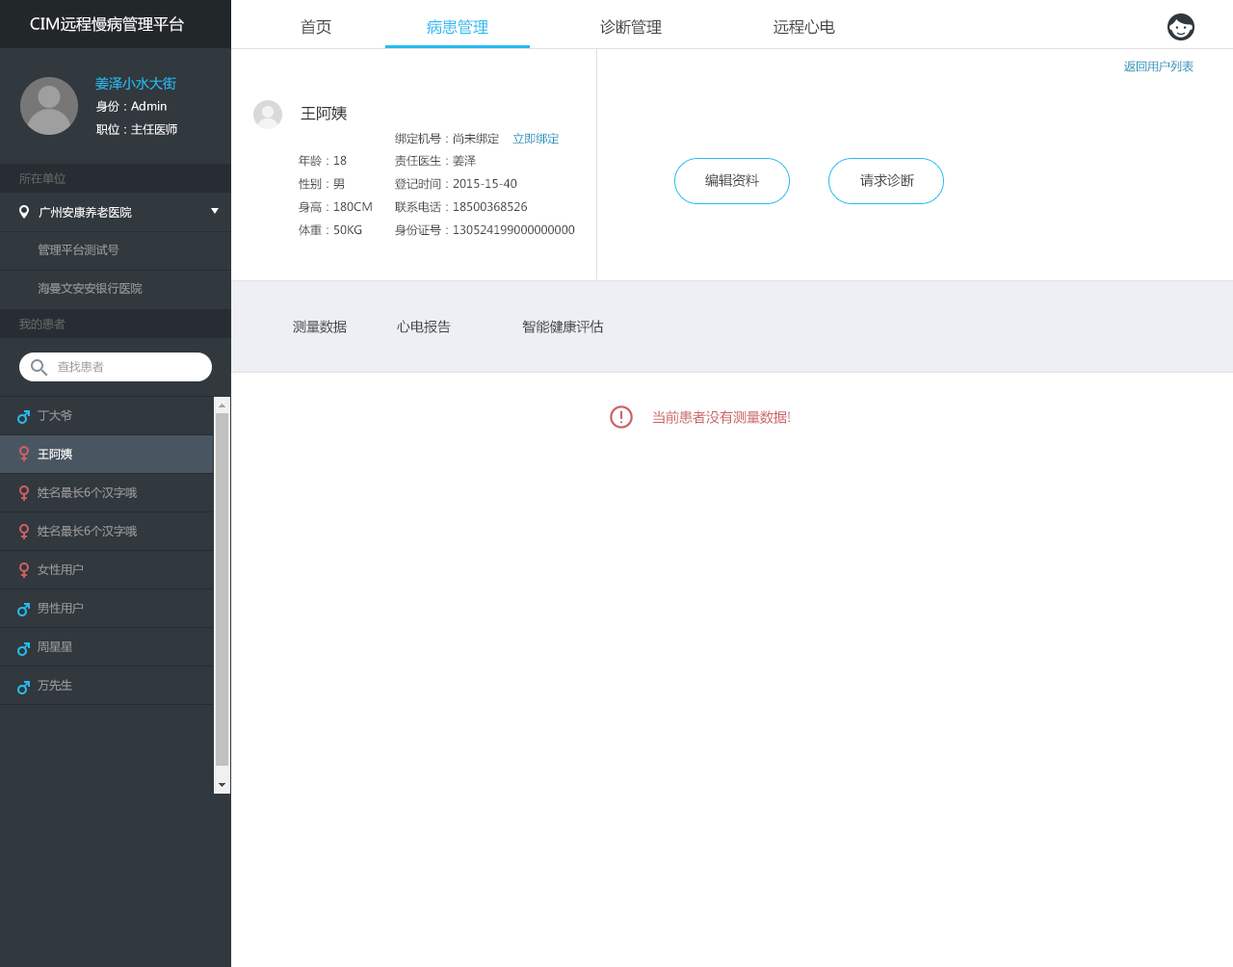
<style>
.page{position:relative;width:1233px;height:967px;background:#ffffff}
.page>*{position:absolute;margin:0}
.t1{font:15.4px "MicrosoftYaHei";color:#ffffff}
.t2{font:15.4px "MicrosoftYaHei";color:#434343}
.t3{font:15.4px "MicrosoftYaHei";color:#26bbef}
.t4{font:11.6px "MicrosoftYaHei";color:#1790ba}
.t5{font:13.5px "MicrosoftYaHei";color:#26bbef}
.t6{font:11.6px "MicrosoftYaHei";color:#ffffff}
.t7{font:15.4px "MicrosoftYaHei";color:#333333}
.t8{font:11.6px "MicrosoftYaHei";color:#434343}
.t9{font:11.6px/23.1px "MicrosoftYaHei";color:#434343}
.t10{font:11.6px "MicrosoftYaHei";color:#666666}
.t11{font:13.5px "MicrosoftYaHei";color:#434343}
.t12{font:11.6px "MicrosoftYaHei";color:#999999}
.t13{font:11.6px/19.3px "MicrosoftYaHei";color:#999999}
.t14{font:11.6px/19.3px "MicrosoftYaHei";color:#ffffff}
.t15{font:13.5px "MicrosoftYaHei";color:#cc6063}
</style>
<div class="page">
<p class="t1" style="left:30px;top:16px;width:154px;height:16px">CIM远程慢病管理平台</p>
<p class="t2" style="left:301px;top:19px;width:30px;height:16px">首页</p>
<p class="t2" style="left:427px;top:19px;width:408px;height:16px"><span class="t3">病患管理    </span>诊断管理    远程心电</p>
<p class="t4" style="left:1124px;top:61px;width:69px;height:11px">返回用户列表</p>
<p class="t5" style="left:95px;top:76px;width:81px;height:15px">姜泽小水大街</p>
<p class="t6" style="left:96px;top:100px;width:71px;height:12px">身份：Admin</p>
<p class="t7" style="left:301px;top:106px;width:46px;height:14px">王阿姨</p>
<p class="t6" style="left:96px;top:123px;width:81px;height:12px">职位：主任医师</p>
<p class="t8" style="left:395px;top:133px;width:164px;height:11px">绑定机号：尚未绑定    <span class="t4">立即绑定</span></p>
<p class="t9" style="left:299px;top:155px;width:73px;height:81px">年龄：18 <br>性别：男<br>身高：180CM<br>体重：50KG</p>
<p class="t9" style="left:395px;top:155px;width:180px;height:81px">责任医生：姜泽<br>登记时间：2015-15-40<br>联系电话：18500368526<br>身份证号：130524199000000000</p>
<p class="t10" style="left:19px;top:172px;width:47px;height:12px">所在单位</p>
<p class="t11" style="left:705px;top:173px;width:54px;height:14px">编辑资料</p>
<p class="t11" style="left:860px;top:173px;width:54px;height:14px">请求诊断</p>
<p class="t6" style="left:39px;top:206px;width:93px;height:13px">广州安康养老医院</p>
<p class="t12" style="left:38px;top:244px;width:81px;height:12px">管理平台测试号</p>
<p class="t12" style="left:38px;top:282px;width:105px;height:12px">海曼文安安银行医院</p>
<p class="t10" style="left:19px;top:318px;width:47px;height:11px">我的患者</p>
<p class="t11" style="left:293px;top:320px;width:311px;height:13px">测量数据  心电报告                  智能健康评估</p>
<p class="t12" style="left:58px;top:361px;width:46px;height:12px">查找患者</p>
<p class="t13" style="left:38px;top:409px;width:99px;height:283px">丁大爷<br><br><span class="t14">王阿姨<br></span><br>姓名最长6个汉字哦<br><br>姓名最长6个汉字哦<br><br>女性用户<br><br>男性用户<br><br>周星星<br><br>万先生<br><br>男女图表请区分<br><br>男性用户<br><br>男性用户<br><br>女性用户<br><br>工程师</p>
<p class="t15" style="left:652px;top:410px;width:138px;height:14px">当前患者没有测量数据!</p>
</div>
